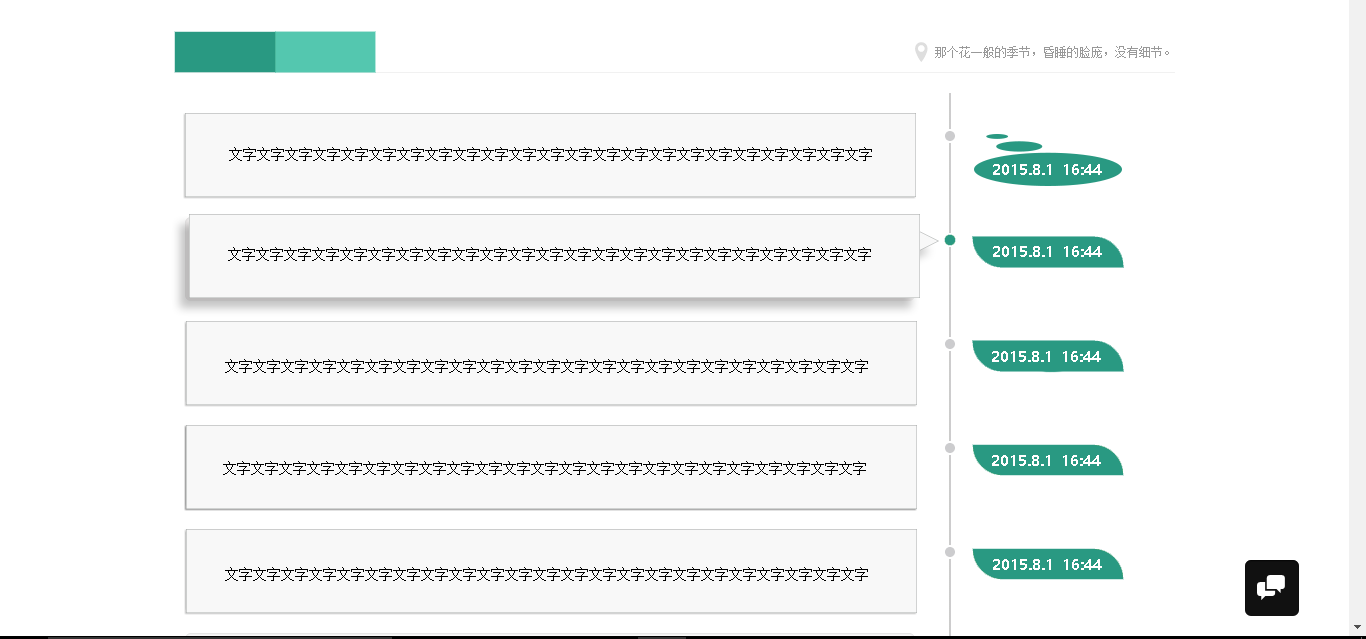
<style>
.page{position:relative;width:1366px;height:639px;background:#ffffff}
.page>*{position:absolute;margin:0}
.t1{font:14px "SimSun";color:#000000}
.t2{font:14px "MicrosoftYaHei-Bold";color:#ffffff}
</style>
<div class="page">
<p class="t1" style="left:229px;top:147px;width:643px;height:14px">文字文字文字文字文字文字文字文字文字文字文字文字文字文字文字文字文字文字文字文字文字文字文字</p>
<p class="t2" style="left:993px;top:164px;width:109px;height:11px">2015.8.1  16:44</p>
<p class="t2" style="left:993px;top:246px;width:109px;height:11px">2015.8.1  16:44</p>
<p class="t1" style="left:228px;top:247px;width:643px;height:14px">文字文字文字文字文字文字文字文字文字文字文字文字文字文字文字文字文字文字文字文字文字文字文字</p>
<p class="t2" style="left:992px;top:351px;width:109px;height:11px">2015.8.1  16:44</p>
<p class="t1" style="left:225px;top:359px;width:643px;height:14px">文字文字文字文字文字文字文字文字文字文字文字文字文字文字文字文字文字文字文字文字文字文字文字</p>
<p class="t1" style="left:223px;top:461px;width:643px;height:14px">文字文字文字文字文字文字文字文字文字文字文字文字文字文字文字文字文字文字文字文字文字文字文字</p>
<p class="t2" style="left:992px;top:455px;width:109px;height:11px">2015.8.1  16:44</p>
<p class="t1" style="left:225px;top:567px;width:643px;height:14px">文字文字文字文字文字文字文字文字文字文字文字文字文字文字文字文字文字文字文字文字文字文字文字</p>
<p class="t2" style="left:993px;top:559px;width:109px;height:11px">2015.8.1  16:44</p>
</div>
